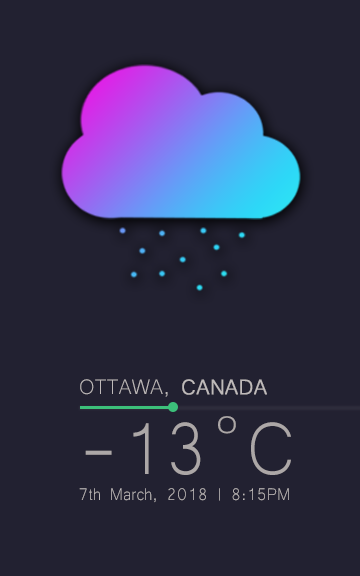
<style>
.page{position:relative;width:360px;height:576px;background:#222131}
.page>*{position:absolute;margin:0}
.t1{font:27px "Microsoft-Yi-Baiti";color:#bfbaba;scale:0.96 1}
.t2{font:27px "Microsoft-Yi-Baiti";color:#bfbaba;font-weight:bold;scale:0.96 1}
.t3{font:94.9px "Microsoft-Yi-Baiti";color:#aca7a7;scale:0.93 1}
.t4{font:43.5px "Microsoft-Yi-Baiti";color:#aca7a7;scale:1.21 1}
.t5{font:21.6px "Microsoft-Yi-Baiti";color:#bfbaba;scale:0.94 1}
</style>
<div class="page">
<p class="t1" style="left:80px;top:379px;width:187px;height:18px">OTTAWA, <span class="t2">CANADA</span></p>
<p class="t3" style="left:85px;top:422px;width:206px;height:53px">-13 C</p>
<p class="t4" style="left:218px;top:416px;width:18px;height:18px">o</p>
<p class="t5" style="left:79px;top:488px;width:210px;height:15px">7th March, 2018 | 8:15PM</p>
</div>
